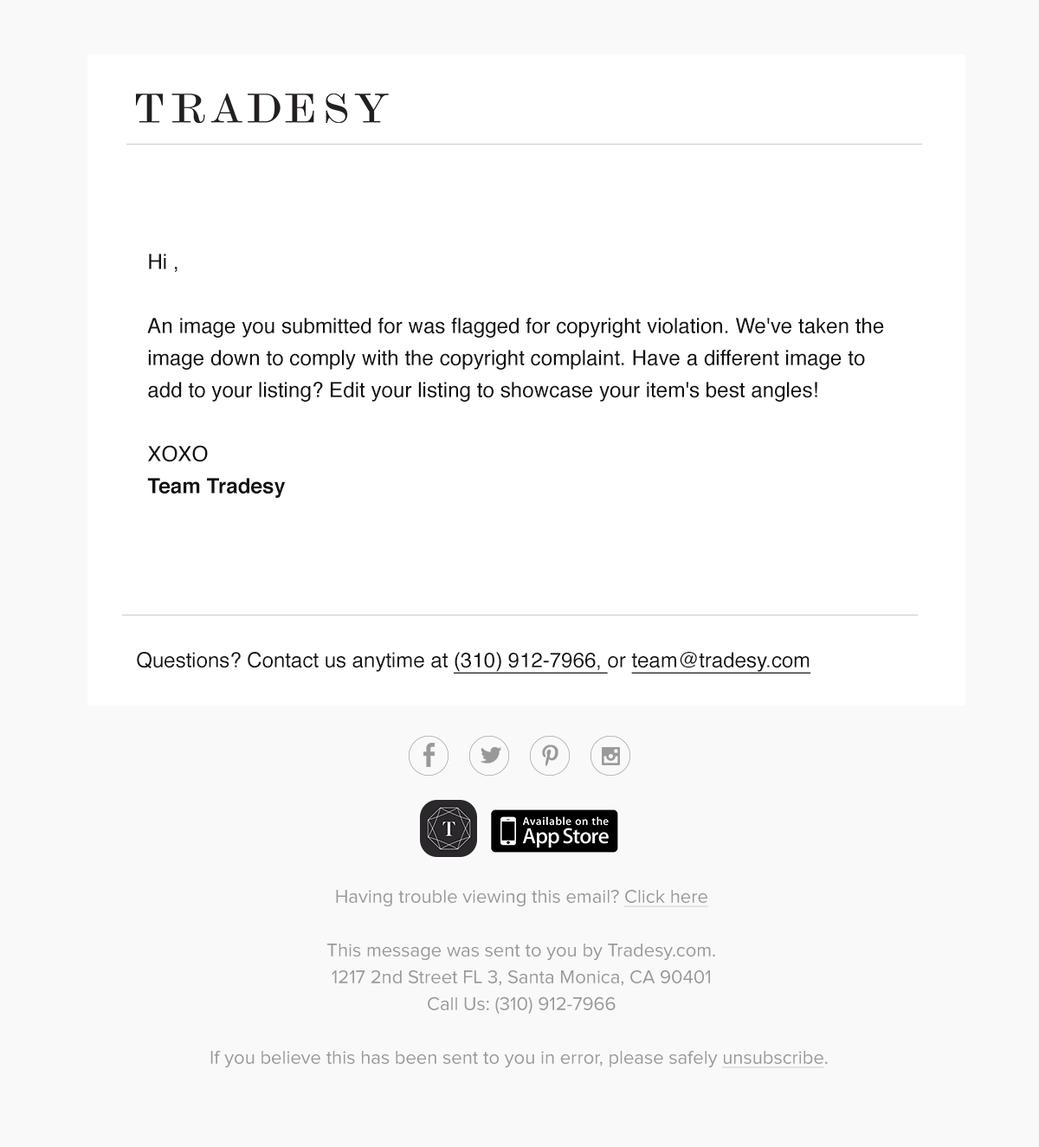
<style>
.page{position:relative;width:1039px;height:1147px;background:#f9f9f9}
.page>*{position:absolute;margin:0}
.t1{font:20.9px/32px "Helvetica";color:#111111}
.t2{font:20.9px/32px "Helvetica-Bold";color:#111111}
.t3{font:20.8px "Helvetica";color:#111111}
.t4{font:20.8px "Helvetica";color:#111111;text-decoration:underline}
.t5{font:19.1px/26.8px "ProximaNova-Regular";color:#999999}
.t6{font:19.1px/26.8px "ProximaNova-Regular";color:#999999;text-decoration:underline}
</style>
<div class="page">
<p class="t1" style="left:147px;top:254px;width:737px;height:244px">Hi ,<br><br>An image you submitted for was flagged for copyright violation. We've taken the image down to comply with the copyright complaint. Have a different image to add to your listing? Edit your listing to showcase your item's best angles!<br><br>XOXO<br><span class="t2">Team Tradesy</span></p>
<p class="t3" style="left:137px;top:652px;width:674px;height:22px">Questions? Contact us anytime at <span class="t4">(310) 912-7966, </span>or <span class="t4">team@tradesy.com</span></p>
<p class="t5" style="left:210px;top:889px;width:618px;height:180px;text-align:center">Having trouble viewing this email? <span class="t6">Click here<br></span><br>This message was sent to you by Tradesy.com.<br>1217 2nd Street FL 3, Santa Monica, CA 90401<br>Call Us: (310) 912-7966<br><br>If you believe this has been sent to you in error, please safely <span class="t6">unsubscribe</span>.</p>
</div>
